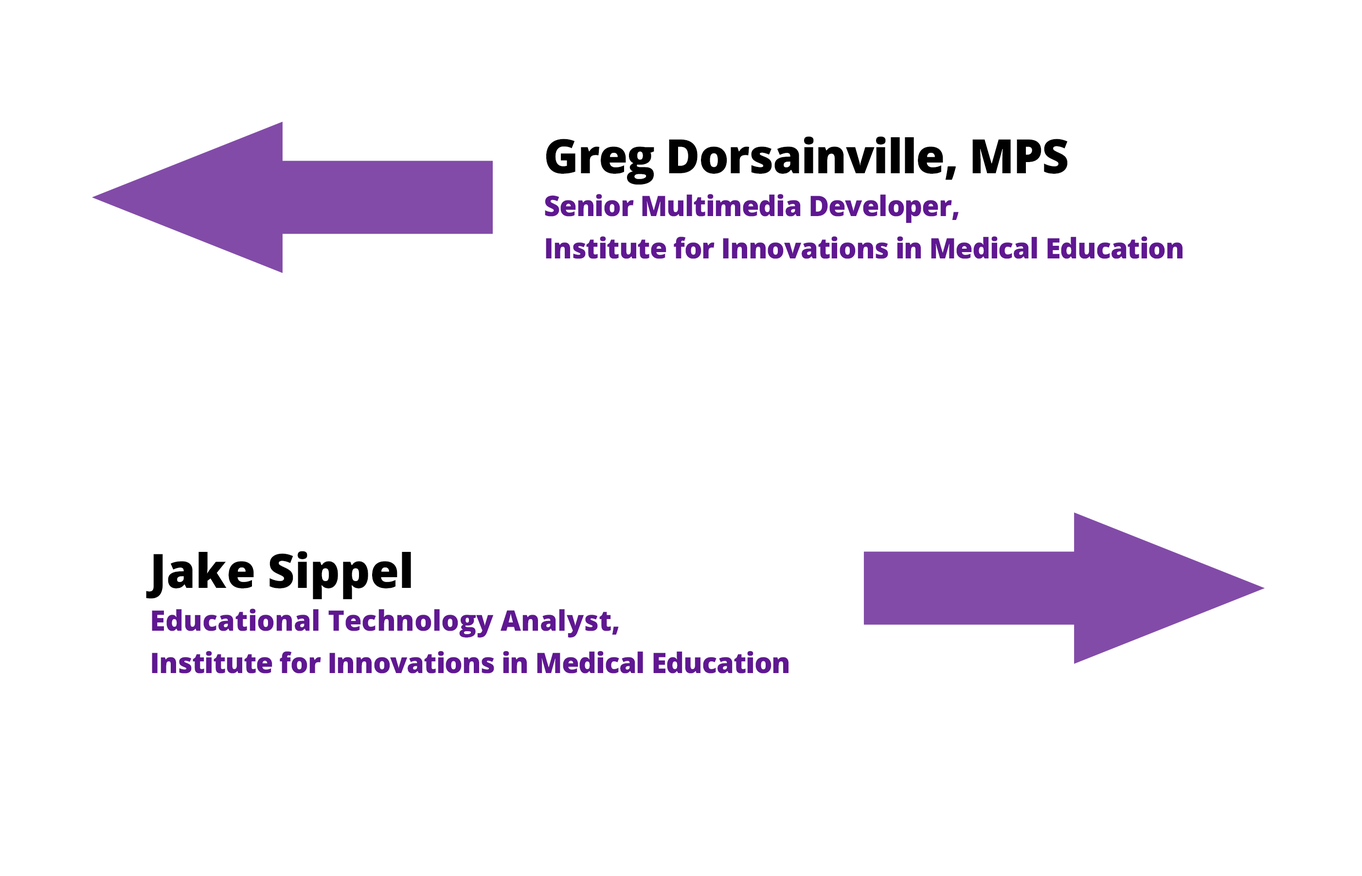
<style>
.page{position:relative;width:1362px;height:876px;background:#ffffff}
.page>*{position:absolute;margin:0}
.t1{font:28.4px/42.6px "OpenSans-Extrabold";letter-spacing:-0.02em;color:#601792}
.t2{font:47.3px/52.5px "OpenSans-Extrabold";letter-spacing:-0.02em;color:#000000}
.t3{font:47.3px/42.6px "OpenSans-Extrabold";color:#000000}
.t4{font:28.4px/42.6px "OpenSans-Extrabold";color:#601792}
</style>
<div class="page">
<p class="t1" style="left:545px;top:136px;width:637px;height:123px"><span class="t2">Greg Dorsainville, MPS<br></span>Senior Multimedia Developer, <br>Institute for Innovations in Medical Education</p>
<p class="t1" style="left:146px;top:551px;width:642px;height:122px"><span class="t3">Jake Sippel<br></span><span class="t4">Educational Technology Analyst, <br></span>Institute for Innovations in Medical Education</p>
</div>
